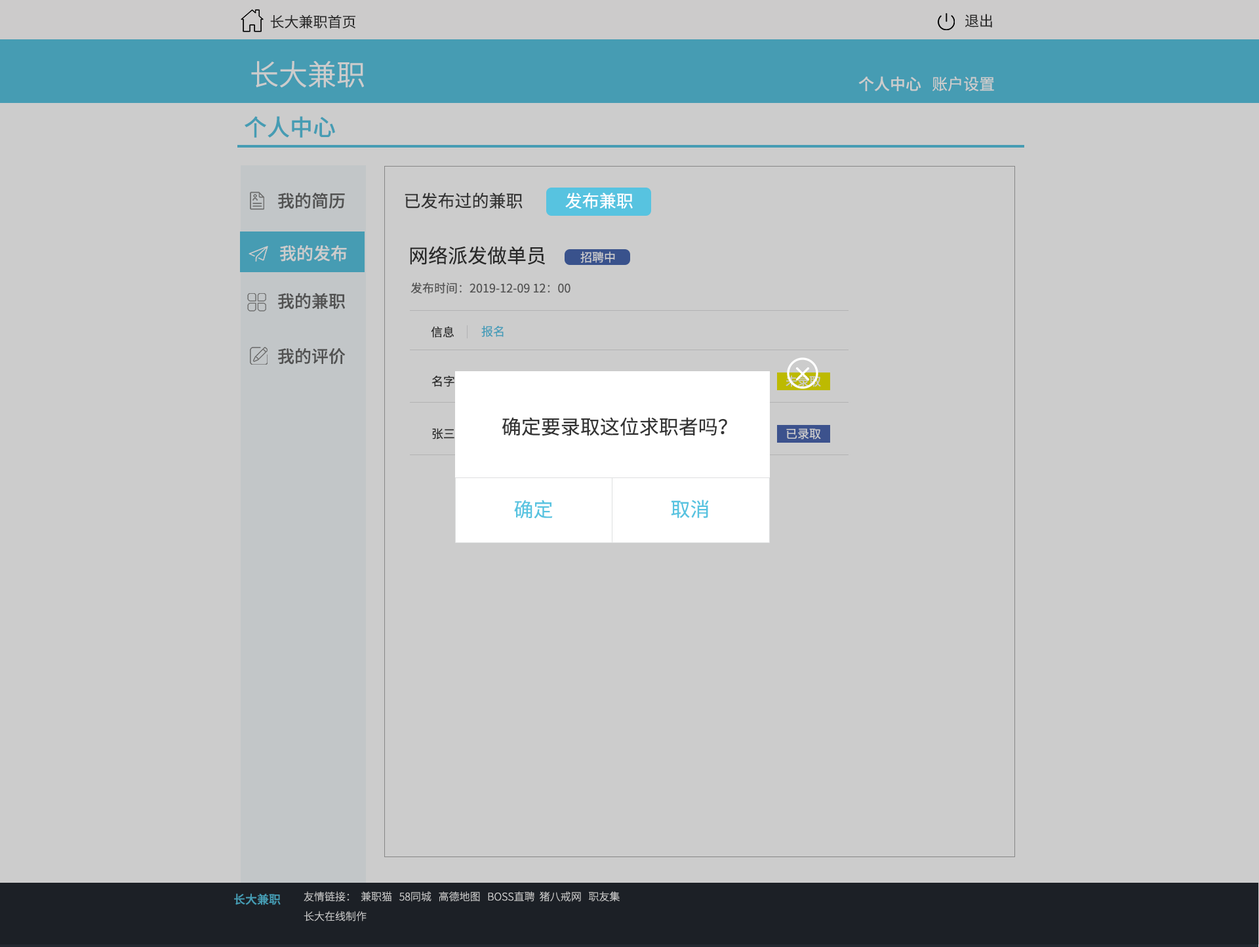
<style>
.page{position:relative;width:1259px;height:947px;background:#cccccc}
.page>*{position:absolute;margin:0}
.t1{font:14.4px "SourceHanSansCN-Normal";color:#333333}
.t2{font:28.9px "SourceHanSansCN-Normal";color:#cccccc}
.t3{font:15.7px "SourceHanSansCN-Medium";color:#cccccc}
.t4{font:15.7px "SourceHanSansCN-Regular";color:#cccccc}
.t5{font:23px "SourceHanSansCN-Medium";color:#469cb3}
.t6{font:17.1px "SourceHanSansCN-Medium";color:#666666}
.t7{font:17.1px "SourceHanSansCN-Regular";color:#333333}
.t8{font:17.1px "SourceHanSansCN-Regular";color:#ffffff}
.t9{font:17.1px "SourceHanSansCN-Medium";color:#cccccc}
.t10{font:19.7px "SourceHanSansCN-Regular";color:#333333}
.t11{font:11.8px "SourceHanSansCN-Regular";color:#cccccc}
.t12{font:11.8px "SourceHanSansCN-Regular";color:#666666}
.t13{font:11.8px "SourceHanSansCN-Regular";color:#333333}
.t14{font:11.8px "SourceHanSansCN-Regular";color:#469cb8}
.t15{font:19.7px "SourceHanSansCN-Regular";color:#57c3e0}
.t16{font:11.8px "SourceHanSansCN-Medium";color:#469cb3}
.t17{font:10.5px "SourceHanSansCN-Light";color:#cccccc}
</style>
<div class="page">
<p class="t1" style="left:270px;top:15px;width:85px;height:14px">长大兼职首页</p>
<p class="t1" style="left:965px;top:14px;width:27px;height:14px">退出</p>
<p class="t2" style="left:251px;top:61px;width:113px;height:27px">长大兼职</p>
<p class="t3" style="left:858px;top:76px;width:136px;height:15px">个人中心<span class="t4">   账户设置</span></p>
<p class="t5" style="left:245px;top:116px;width:90px;height:22px">个人中心</p>
<p class="t6" style="left:278px;top:192px;width:67px;height:17px">我的简历</p>
<p class="t7" style="left:405px;top:193px;width:118px;height:16px">已发布过的兼职</p>
<p class="t8" style="left:565px;top:193px;width:68px;height:16px">发布兼职</p>
<p class="t9" style="left:280px;top:245px;width:67px;height:17px">我的发布</p>
<p class="t10" style="left:410px;top:246px;width:135px;height:19px">网络派发做单员</p>
<p class="t11" style="left:580px;top:251px;width:35px;height:12px">招聘中</p>
<p class="t6" style="left:278px;top:292px;width:67px;height:18px">我的兼职</p>
<p class="t12" style="left:411px;top:282px;width:160px;height:12px">发布时间：2019-12-09 12：00</p>
<p class="t13" style="left:431px;top:326px;width:23px;height:12px">信息</p>
<p class="t14" style="left:481px;top:325px;width:23px;height:12px">报名</p>
<p class="t6" style="left:278px;top:348px;width:68px;height:17px">我的评价</p>
<p class="t13" style="left:432px;top:375px;width:22px;height:12px">名字</p>
<p class="t11" style="left:786px;top:375px;width:35px;height:12px">未录取</p>
<p class="t10" style="left:502px;top:417px;width:225px;height:19px">确定要录取这位求职者吗？</p>
<p class="t13" style="left:432px;top:428px;width:22px;height:11px">张三</p>
<p class="t11" style="left:786px;top:428px;width:35px;height:11px">已录取</p>
<p class="t15" style="left:514px;top:500px;width:39px;height:19px">确定</p>
<p class="t15" style="left:671px;top:500px;width:38px;height:18px">取消</p>
<p class="t16" style="left:234px;top:893px;width:47px;height:12px">长大兼职</p>
<p class="t17" style="left:304px;top:891px;width:316px;height:11px">友情链接：  兼职猫   58同城   高德地图   BOSS直聘  猪八戒网   职友集</p>
<p class="t17" style="left:304px;top:911px;width:63px;height:10px">长大在线制作</p>
</div>
